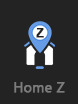
<style>
.page{position:relative;width:78px;height:104px;background:#232323}
.page>*{position:absolute;margin:0}
.t1{font:12px "Arial-BoldMT";color:#232323;font-weight:bold}
.t2{font:14px "SegoeUI";color:#7c7c7c;font-weight:bold}
</style>
<div class="page">
<p class="t1" style="left:36px;top:28px;width:8px;height:10px">Z</p>
<p class="t2" style="left:14px;top:82px;width:51px;height:11px">Home Z</p>
</div>
